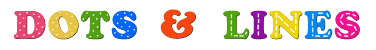
<style>
.page{position:relative;width:376px;height:50px;background:#ffffff}
.page>*{position:absolute;margin:0}
.t1{font:38.4px "CooperBlackStd";letter-spacing:0.05em;color:#e94472}
.t2{font:38.4px "CooperBlackStd";letter-spacing:0.05em;color:#e9c444}
.t3{font:38.4px "CooperBlackStd";letter-spacing:0.05em;color:#50a20e}
.t4{font:38.4px "CooperBlackStd";letter-spacing:0.05em;color:#0166ff}
.t5{font:38.4px "CooperBlackStd";letter-spacing:0.05em}
.t6{font:38.4px "CooperBlackStd";letter-spacing:0.05em;color:#fa4710}
.t7{font:38.4px "CooperBlackStd";letter-spacing:0.05em;color:#8f0ea2}
.t8{font:38.4px "CooperBlackStd";letter-spacing:0.05em;color:#edd405}
.t9{font:38.4px "CooperBlackStd";letter-spacing:0.05em;color:#0588ed}
.t10{font:38.4px "CooperBlackStd";letter-spacing:0.05em;color:#f30f90}
</style>
<div class="page">
<p class="t1" style="left:13px;top:10px;width:124px;height:29px">D<span class="t2">O</span><span class="t3">T</span><span class="t4">S</span></p>
<p class="t5" style="left:14px;top:11px;width:123px;height:29px">DOTS</p>
<p class="t6" style="left:160px;top:9px;width:36px;height:30px">&amp;</p>
<p class="t6" style="left:161px;top:10px;width:35px;height:29px">&amp;</p>
<p class="t5" style="left:223px;top:10px;width:137px;height:30px">LINES</p>
<p class="t3" style="left:223px;top:10px;width:137px;height:29px">L<span class="t7">I</span><span class="t8">N</span><span class="t9">E</span><span class="t10">S</span></p>
</div>
